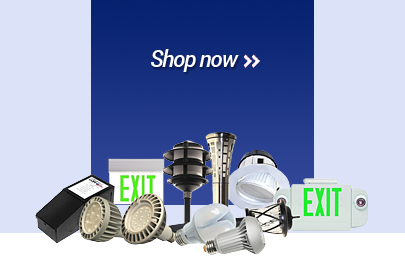
<style>
.page{position:relative;width:405px;height:280px;background:#dce2f8}
.page>*{position:absolute;margin:0}
.t1{font:39.1px "Roboto-MediumItalic";letter-spacing:-0.05em;color:#ffffff}
</style>
<div class="page">
<p class="t1" style="left:151px;top:49px;width:88px;height:23px">Shop now</p>
</div>
